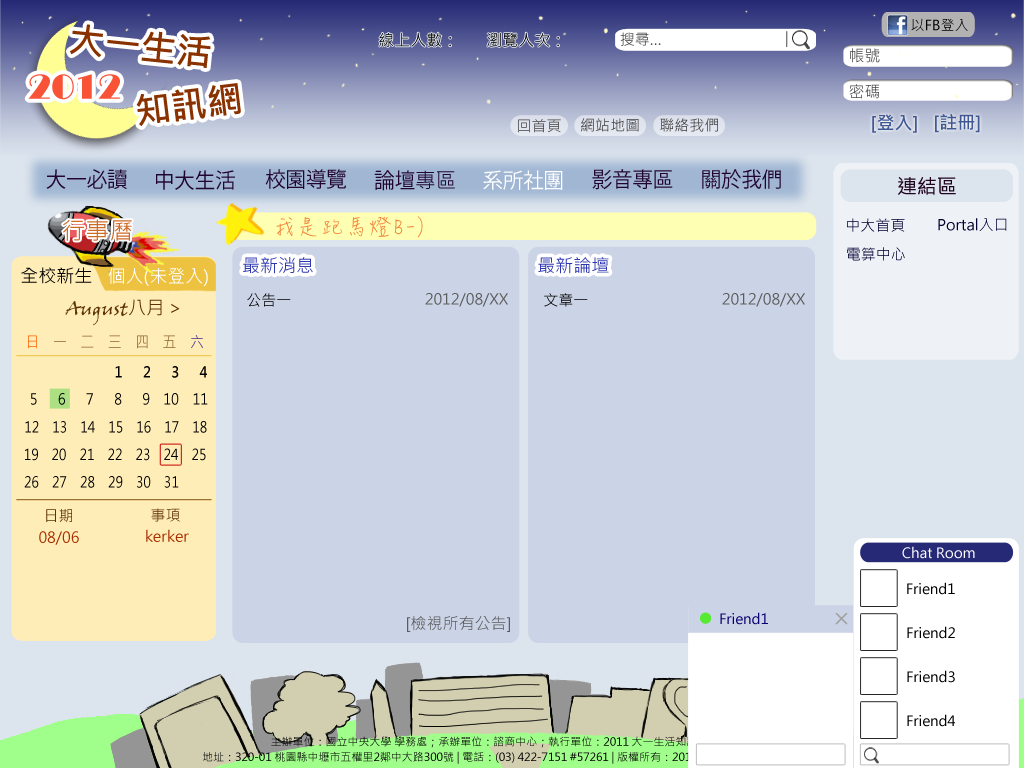
<style>
.page{position:relative;width:1024px;height:768px;background:#cbd3e6}
.page>*{position:absolute;margin:0}
.t1{font:36px "MicrosoftJhengHeiBold";color:#8a3100}
.t2{font:14px "MicrosoftJhengHeiRegular";color:#000000}
.t3{font:16px "MicrosoftJhengHeiRegular";color:#000000}
.t4{font:15px "MicrosoftJhengHeiRegular";color:#474747}
.t5{font:16px "MicrosoftJhengHeiRegular";color:#474747}
.t6{font:36px "Broadway";color:#f95439}
.t7{font:15px "MicrosoftJhengHeiRegular";color:#414141}
.t8{font:18px "MicrosoftJhengHeiBold";color:#405895}
.t9{font:21px "KozGoPr6N-Regular";color:#210530}
.t10{font:21px "MicrosoftJhengHeiRegular";color:#210530}
.t11{font:21px "KozGoPr6N-Regular";color:#ffffff}
.t12{font:20px "MicrosoftJhengHeiRegular";color:#210520}
.t13{font:24px "MicrosoftJhengHeiRegular";color:#cf6a27}
.t14{font:24px "DFHsiu-W3-WIN-BF";color:#f2843b}
.t15{font:15px "MicrosoftJhengHeiRegular"}
.t16{font:15px "MicrosoftJhengHeiRegular";color:#010031}
.t17{font:18px "MicrosoftJhengHeiRegular";color:#2f37b0}
.t18{font:18px "MicrosoftJhengHeiRegular";color:#000000}
.t19{font:18px "MicrosoftJhengHeiRegular";color:#ffffff}
.t20{font:15px "MicrosoftJhengHeiRegular";color:#000000}
.t21{font:15px "MicrosoftJhengHeiRegular";color:#5c5c5c}
.t22{font:18px "VinerHandITC";color:#5e3304}
.t23{font:18px "MicrosoftJhengHeiRegular";color:#5e3304}
.t24{font:15px "MicrosoftJhengHeiRegular";scale:0.91 1}
.t25{font:15px "MicrosoftJhengHeiBold";color:#000000;scale:0.9 1}
.t26{font:15px "MicrosoftJhengHeiRegular";color:#000000;scale:0.9 1}
.t27{font:15px "MicrosoftJhengHeiRegular";color:#000000;scale:0.86 1}
.t28{font:15px "MicrosoftJhengHeiRegular";color:#5e3304}
.t29{font:15px "MicrosoftJhengHeiRegular";color:#a72f00}
.t30{font:14px "MicrosoftJhengHeiRegular";color:#ffffff}
.t31{font:16px "MicrosoftJhengHeiRegular";color:#5c5c5c}
.t32{font:14px "MicrosoftJhengHeiRegular";color:#080070}
.t33{font:11px "MicrosoftJhengHeiRegular";color:#000000}
</style>
<div class="page">
<p class="t1" style="left:69px;top:24px;width:142px;height:44px;rotate:6deg">大一生活</p>
<p class="t2" style="left:911px;top:18px;width:57px;height:13px">以FB登入</p>
<p class="t3" style="left:379px;top:32px;width:180px;height:15px">線上人數：   　瀏覽人次：</p>
<p class="t4" style="left:620px;top:32px;width:41px;height:14px">搜尋…</p>
<p class="t5" style="left:850px;top:48px;width:30px;height:15px">帳號</p>
<p class="t6" style="left:28px;top:74px;width:92px;height:26px">2012</p>
<p class="t1" style="left:136px;top:83px;width:105px;height:43px;rotate:-7deg">知訊網</p>
<p class="t5" style="left:849px;top:84px;width:30px;height:15px">密碼</p>
<p class="t7" style="left:518px;top:119px;width:43px;height:14px">回首頁</p>
<p class="t7" style="left:581px;top:118px;width:58px;height:14px">網站地圖</p>
<p class="t7" style="left:660px;top:118px;width:58px;height:14px">聯絡我們</p>
<p class="t8" style="left:872px;top:114px;width:45px;height:19px">[登入]</p>
<p class="t8" style="left:935px;top:114px;width:45px;height:19px">[註冊]</p>
<p class="t9" style="left:46px;top:169px;width:81px;height:20px">大一必讀</p>
<p class="t9" style="left:156px;top:170px;width:79px;height:20px">中大生活</p>
<p class="t9" style="left:265px;top:169px;width:81px;height:20px">校園導覽</p>
<p class="t9" style="left:374px;top:170px;width:81px;height:21px">論壇<span class="t10">專區</span></p>
<p class="t11" style="left:483px;top:170px;width:80px;height:20px">系所社團</p>
<p class="t9" style="left:592px;top:169px;width:81px;height:21px">影音專區</p>
<p class="t9" style="left:702px;top:169px;width:79px;height:20px">關於我們</p>
<p class="t12" style="left:898px;top:177px;width:58px;height:18px">連結區</p>
<p class="t13" style="left:63px;top:219px;width:69px;height:22px">行事曆</p>
<p class="t14" style="left:276px;top:216px;width:147px;height:22px">我是跑馬燈B-)</p>
<p class="t15" style="left:847px;top:218px;width:58px;height:14px">中大首頁</p>
<p class="t16" style="left:938px;top:218px;width:69px;height:13px">Portal入口</p>
<p class="t17" style="left:243px;top:257px;width:70px;height:17px">最新消息</p>
<p class="t17" style="left:538px;top:257px;width:71px;height:17px">最新論壇</p>
<p class="t15" style="left:847px;top:247px;width:58px;height:14px">電算中心</p>
<p class="t18" style="left:21px;top:267px;width:71px;height:17px">全校新生</p>
<p class="t19" style="left:108px;top:267px;width:100px;height:19px">個人(未登入)</p>
<p class="t20" style="left:247px;top:293px;width:44px;height:14px">公告一</p>
<p class="t21" style="left:425px;top:293px;width:83px;height:14px">2012/08/XX</p>
<p class="t15" style="left:544px;top:293px;width:44px;height:14px">文章一</p>
<p class="t21" style="left:722px;top:293px;width:83px;height:14px">2012/08/XX</p>
<p class="t22" style="left:65px;top:299px;width:115px;height:27px">August<span class="t23">八月 &gt;</span></p>
<p class="t24" style="left:28px;top:335px;width:175px;height:14px">日　一　二　三　四　五　六</p>
<p class="t25" style="left:115px;top:366px;width:92px;height:12px">1 　 2　  3 　 4</p>
<p class="t26" style="left:31px;top:393px;width:177px;height:12px">5　  6　  7　  8　  9    10　11</p>
<p class="t27" style="left:25px;top:421px;width:182px;height:12px">12　13　14　15　16　17　18</p>
<p class="t27" style="left:25px;top:448px;width:181px;height:13px">19　20　21　22　23　24　25</p>
<p class="t27" style="left:24px;top:476px;width:155px;height:12px">26　27　28　29　30　31</p>
<p class="t28" style="left:46px;top:509px;width:26px;height:13px">日期</p>
<p class="t15" style="left:151px;top:508px;width:29px;height:14px">事項</p>
<p class="t29" style="left:39px;top:531px;width:40px;height:14px">08/06</p>
<p class="t29" style="left:146px;top:529px;width:43px;height:13px">kerker</p>
<p class="t30" style="left:902px;top:546px;width:73px;height:13px">Chat Room</p>
<p class="t2" style="left:907px;top:582px;width:48px;height:13px">Friend1</p>
<p class="t31" style="left:407px;top:616px;width:103px;height:16px">[檢視所有公告]</p>
<p class="t32" style="left:720px;top:612px;width:48px;height:13px">Friend1</p>
<p class="t2" style="left:907px;top:626px;width:48px;height:13px">Friend2</p>
<p class="t2" style="left:907px;top:670px;width:48px;height:13px">Friend3</p>
<p class="t2" style="left:907px;top:714px;width:48px;height:13px">Friend4</p>
<p class="t33" style="left:271px;top:736px;width:481px;height:12px">主辦單位：國立中央大學 學務處；承辦單位：諮商中心；執行單位：2011 大一生活知訊網工作團隊</p>
<p class="t33" style="left:203px;top:751px;width:618px;height:13px">地址：320-01 桃園縣中壢市五權里2鄰中大路300號 | 電話：(03) 422-7151 #57261 | 版權所有：2011 大一生活知訊網工作團隊</p>
</div>
